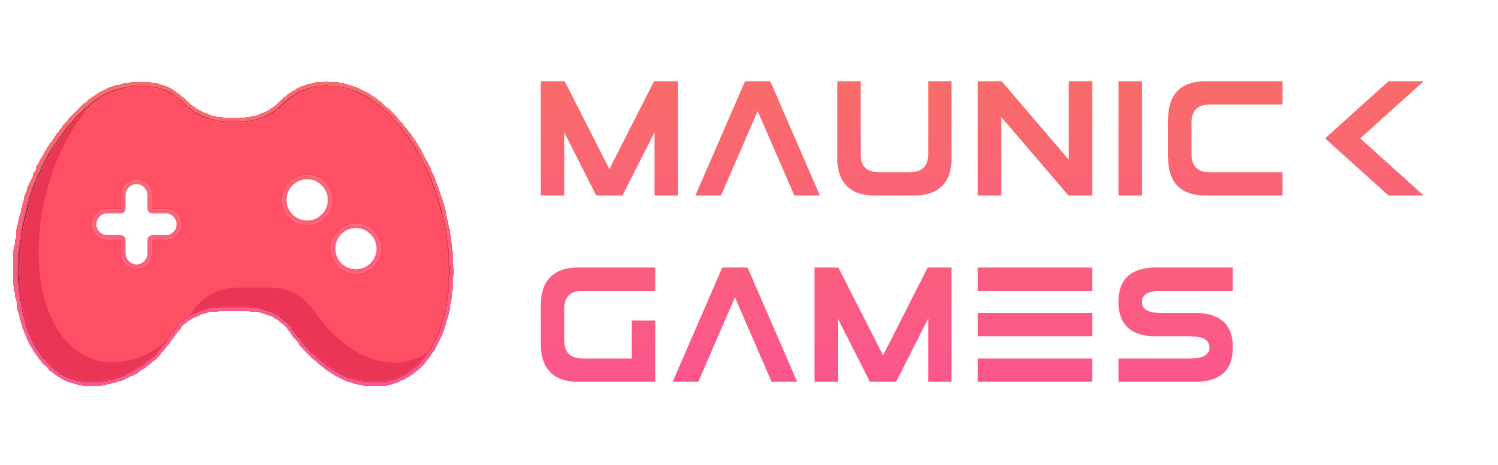
<style>
.page{position:relative;width:1498px;height:465px;background:#ffffff}
.page>*{position:absolute;margin:0}
.t1{font:155.2px "ElementalEnd";color:#fa6476;text-transform:uppercase;font-weight:bold}
</style>
<div class="page">
<p class="t1" style="left:540px;top:81px;width:883px;height:301px">maunick <br>games</p>
</div>
